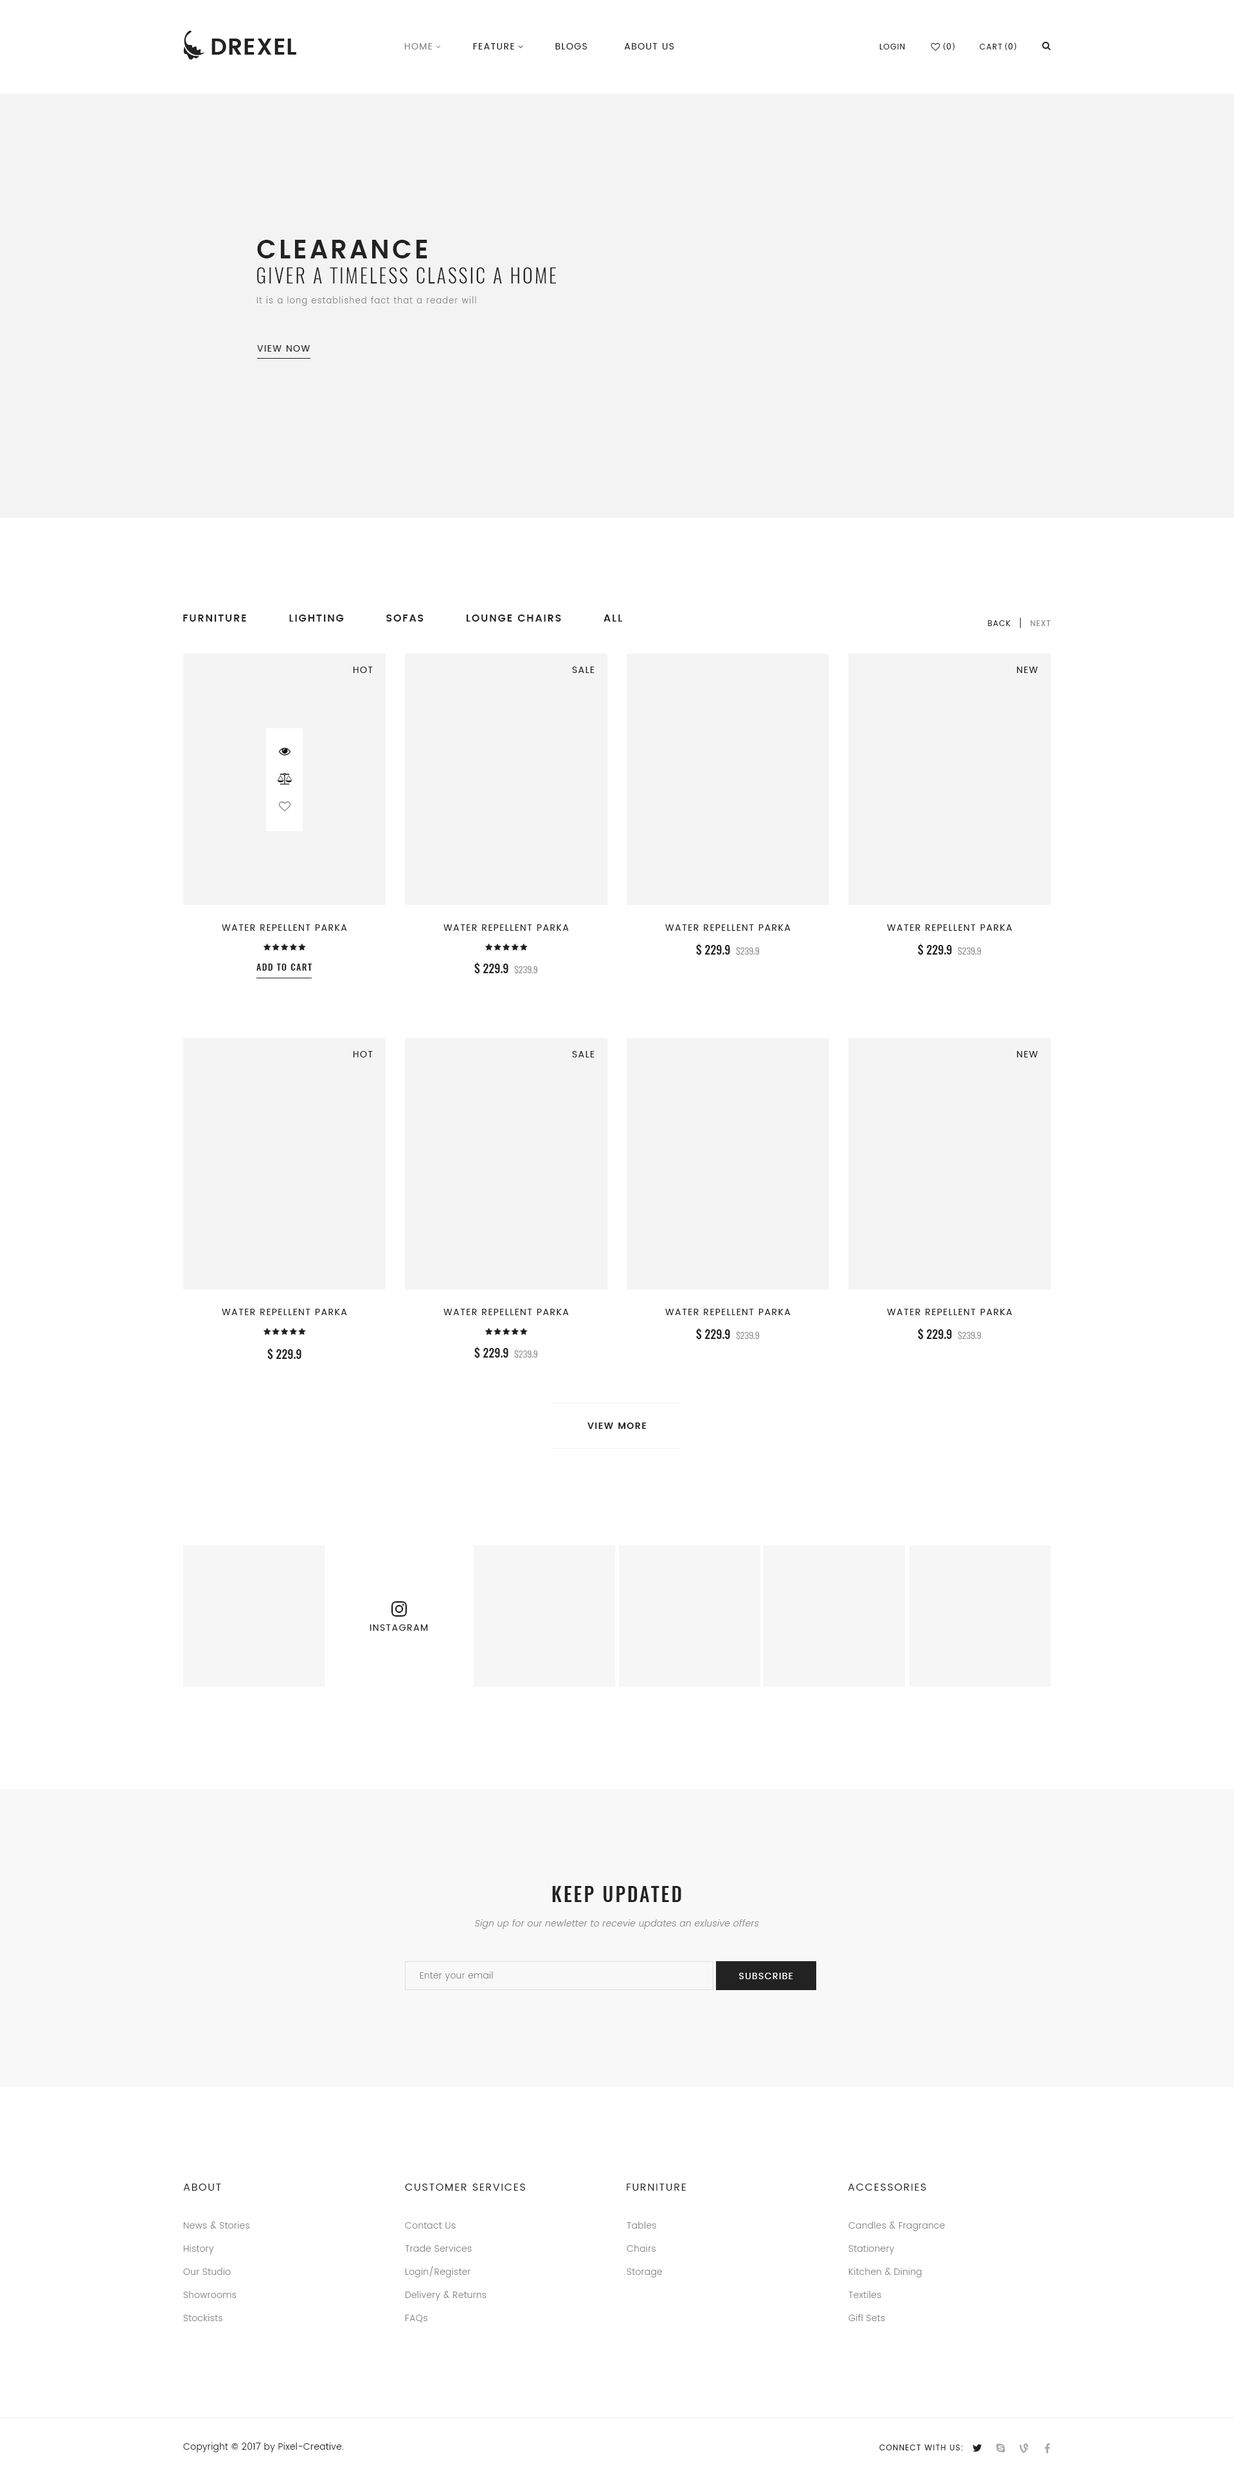
<style>
.page{position:relative;width:1234px;height:2478px;background:#ffffff}
.page>*{position:absolute;margin:0}
.t1{font:9px "Poppins-Regular";letter-spacing:0.1em;color:#222222;text-transform:uppercase}
.t2{font:9px "Poppins-Regular";letter-spacing:0.1em;color:#888888;text-transform:uppercase}
.t3{font:7.7px "Poppins-Regular";letter-spacing:0.1em;color:#222222;text-transform:uppercase}
.t4{font:9px "MyriadPro-Regular";letter-spacing:0.1em;color:#222222;text-transform:uppercase}
.t5{font:25.7px "Poppins-SemiBold";letter-spacing:0.1em;color:#222222;text-transform:uppercase}
.t6{font:19.3px "Oswald-Light";letter-spacing:0.1em;color:#222222;text-transform:uppercase}
.t7{font:8.4px "Poppins-Light";letter-spacing:0.1em;color:#888888}
.t8{font:10.3px "Poppins-SemiBold";letter-spacing:0.1em;color:#222222;text-transform:uppercase}
.t9{font:7.7px "MyriadPro-Regular";letter-spacing:0.1em;color:#888888;text-transform:uppercase}
.t10{font:7.7px "Poppins-Regular";letter-spacing:0.1em;color:#888888;text-transform:uppercase}
.t11{font:11.6px "Oswald-Medium";color:#222222}
.t12{font:9px "Oswald-Light";color:#888888}
.t13{font:9px "Oswald-Medium";letter-spacing:0.1em;color:#222222;text-transform:uppercase}
.t14{font:9px "Poppins-SemiBold";letter-spacing:0.1em;color:#222222;text-transform:uppercase}
.t15{font:19.3px "Oswald-Medium";letter-spacing:0.1em;color:#222222}
.t16{font:9px "Poppins-Light";letter-spacing:0.025em;color:#888888;font-style:italic}
.t17{font:9px "Poppins-Light";letter-spacing:0.025em;color:#888888}
.t18{font:9px "Poppins-Regular";letter-spacing:0.1em;color:#ffffff;text-transform:uppercase}
.t19{font:10.3px "Poppins-Regular";letter-spacing:0.1em;color:#222222;text-transform:uppercase}
.t20{font:9px/23.1px "Poppins-Light";letter-spacing:0.025em;color:#888888}
.t21{font:9px "Poppins-Light";letter-spacing:0.025em;color:#222222}
</style>
<div class="page">
<p class="t1" style="left:404px;top:43px;width:270px;height:7px"><span class="t2">Home</span>           Feature           Blogs          About Us</p>
<p class="t3" style="left:880px;top:44px;width:25px;height:6px">Login</p>
<p class="t4" style="left:944px;top:42px;width:11px;height:8px">(0)</p>
<p class="t3" style="left:980px;top:44px;width:22px;height:6px">Cart</p>
<p class="t4" style="left:1005px;top:42px;width:11px;height:8px">(0)</p>
<p class="t5" style="left:257px;top:240px;width:171px;height:18px">Clearance</p>
<p class="t6" style="left:257px;top:267px;width:299px;height:17px">Giver a timeless classic a home</p>
<p class="t7" style="left:256px;top:296px;width:220px;height:10px">It is a long established fact that a reader will</p>
<p class="t1" style="left:257px;top:345px;width:53px;height:7px">View now</p>
<p class="t8" style="left:183px;top:615px;width:439px;height:7px">Furniture          Lighting          Sofas          Lounge Chairs          All</p>
<p class="t3" style="left:988px;top:620px;width:23px;height:6px">Back</p>
<p class="t9" style="left:1030px;top:620px;width:21px;height:6px"><span class="t10">N</span>ext</p>
<p class="t1" style="left:353px;top:667px;width:20px;height:6px">Hot</p>
<p class="t1" style="left:572px;top:667px;width:23px;height:6px">SAle</p>
<p class="t1" style="left:1017px;top:667px;width:21px;height:6px">New</p>
<p class="t1" style="left:222px;top:924px;width:125px;height:7px">Water Repellent Parka</p>
<p class="t1" style="left:444px;top:924px;width:125px;height:7px">Water Repellent Parka</p>
<p class="t1" style="left:665px;top:924px;width:126px;height:7px">Water Repellent Parka</p>
<p class="t1" style="left:887px;top:924px;width:126px;height:7px">Water Repellent Parka</p>
<p class="t11" style="left:696px;top:944px;width:64px;height:12px">$ 229.9  <span class="t12">$239.9</span></p>
<p class="t11" style="left:918px;top:944px;width:64px;height:12px">$ 229.9  <span class="t12">$239.9</span></p>
<p class="t13" style="left:256px;top:964px;width:56px;height:7px">Add to cart</p>
<p class="t11" style="left:474px;top:962px;width:64px;height:13px">$ 229.9  <span class="t12">$239.9</span></p>
<p class="t1" style="left:353px;top:1051px;width:20px;height:7px">Hot</p>
<p class="t1" style="left:572px;top:1051px;width:23px;height:7px">SAle</p>
<p class="t1" style="left:1017px;top:1051px;width:21px;height:7px">New</p>
<p class="t1" style="left:222px;top:1309px;width:125px;height:6px">Water Repellent Parka</p>
<p class="t1" style="left:444px;top:1309px;width:125px;height:6px">Water Repellent Parka</p>
<p class="t1" style="left:665px;top:1309px;width:126px;height:6px">Water Repellent Parka</p>
<p class="t1" style="left:887px;top:1309px;width:126px;height:6px">Water Repellent Parka</p>
<p class="t11" style="left:696px;top:1328px;width:64px;height:12px">$ 229.9  <span class="t12">$239.9</span></p>
<p class="t11" style="left:918px;top:1328px;width:64px;height:12px">$ 229.9  <span class="t12">$239.9</span></p>
<p class="t11" style="left:267px;top:1348px;width:35px;height:12px">$ 229.9</p>
<p class="t11" style="left:474px;top:1347px;width:64px;height:12px">$ 229.9  <span class="t12">$239.9</span></p>
<p class="t14" style="left:588px;top:1423px;width:59px;height:6px">View more</p>
<p class="t1" style="left:370px;top:1625px;width:58px;height:6px">Instagram</p>
<p class="t15" style="left:552px;top:1886px;width:129px;height:16px">KEEP UPDATED</p>
<p class="t16" style="left:475px;top:1920px;width:284px;height:9px">Sign up for our newletter to recevie updates an exlusive offers</p>
<p class="t17" style="left:420px;top:1972px;width:73px;height:9px">Enter your email</p>
<p class="t18" style="left:739px;top:1973px;width:54px;height:6px">Subscribe</p>
<p class="t19" style="left:183px;top:2184px;width:38px;height:7px">About</p>
<p class="t19" style="left:405px;top:2184px;width:120px;height:7px">Customer services</p>
<p class="t19" style="left:627px;top:2184px;width:59px;height:7px">Furniture</p>
<p class="t19" style="left:848px;top:2184px;width:78px;height:7px">Accessories</p>
<p class="t20" style="left:183px;top:2222px;width:66px;height:99px">News &amp; Stories<br>History<br>Our Studio<br>Showrooms<br>Stockists</p>
<p class="t20" style="left:405px;top:2222px;width:82px;height:101px">Contact Us<br>Trade Services<br>Login/Register<br>Delivery &amp; Returns<br>FAQs</p>
<p class="t20" style="left:627px;top:2222px;width:35px;height:56px">Tables<br>Chairs<br>Storage</p>
<p class="t20" style="left:849px;top:2222px;width:96px;height:99px">Candles &amp; Fragrance<br>Stationery<br>Kitchen &amp; Dining<br>Textiles<br>Gifl Sets</p>
<p class="t21" style="left:183px;top:2443px;width:161px;height:9px">Copyright © 2017 by Pixel-Creative.</p>
<p class="t3" style="left:879px;top:2445px;width:84px;height:6px">Connect with us:</p>
</div>
